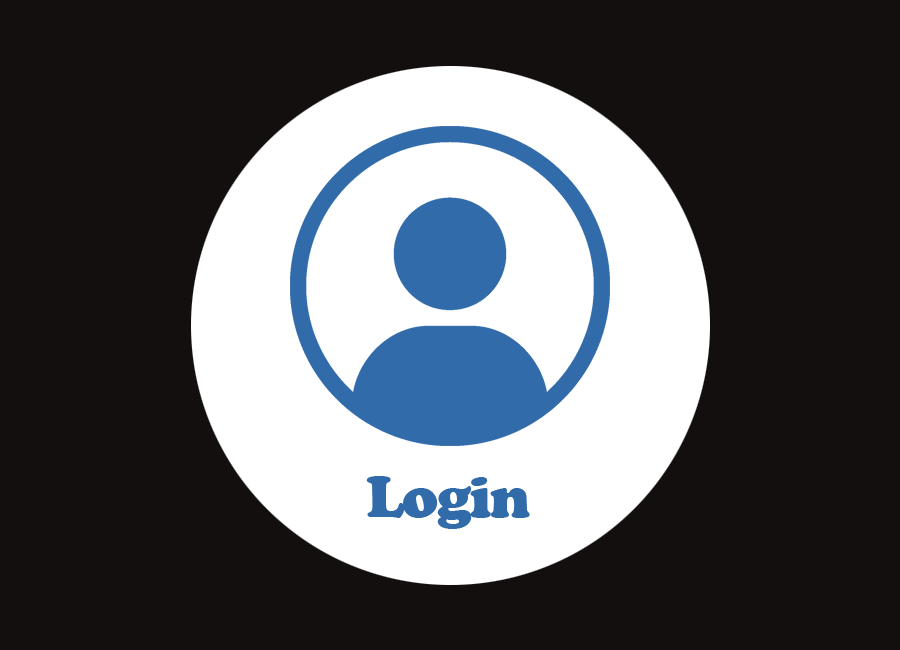
<style>
.page{position:relative;width:900px;height:650px;background:#130f0f}
.page>*{position:absolute;margin:0}
.t1{font:60px "CooperBlack";letter-spacing:-0.025em;color:#316baa}
</style>
<div class="page">
<p class="t1" style="left:366px;top:476px;width:164px;height:53px">Login</p>
</div>
